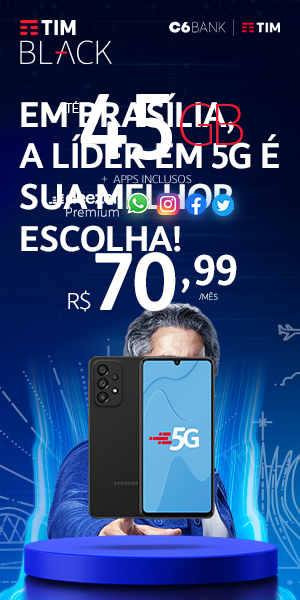
<style>
.page{position:relative;width:300px;height:600px}
.page>*{position:absolute;margin:0}
.t1{font:34.5px "TIMSans-Bold";letter-spacing:-0.02em;color:#ffffff;text-transform:uppercase}
.t2{font:13.1px "TIMSans-Light";letter-spacing:-0.06em;color:#ffffff;text-transform:uppercase}
.t3{font:90.8px "TIMSans-Medium";color:#ffffff;text-transform:uppercase}
.t4{font:57.3px "TIMSans-Thin";letter-spacing:-0.08em;color:#ed1b2f;text-transform:uppercase}
.t5{font:79px "TIMSans-Bold";color:#ffffff;text-transform:uppercase}
.t6{font:41.3px "TIMSans-Bold";color:#ffffff;text-transform:uppercase}
.t7{font:22.3px "TIMSans-Light";letter-spacing:-0.035em;color:#ffffff;text-transform:uppercase}
.t8{font:8.7px "TIMSans-Light";letter-spacing:-0.025em;color:#ffffff;text-transform:uppercase}
</style>
<div class="page">
<p class="t1" style="left:21px;top:93px;width:213px;height:41px">Em Brasília,</p>
<p class="t2" style="left:58px;top:101px;width:21px;height:12px">até</p>
<p class="t3" style="left:80px;top:94px;width:92px;height:66px">45</p>
<p class="t4" style="left:180px;top:103px;width:63px;height:43px">GB</p>
<p class="t1" style="left:19px;top:134px;width:260px;height:35px">a líder em 5G é</p>
<p class="t1" style="left:20px;top:183px;width:214px;height:27px">sua melhor</p>
<p class="t1" style="left:21px;top:225px;width:160px;height:27px">escolha!</p>
<p class="t5" style="left:95px;top:252px;width:81px;height:59px">70</p>
<p class="t6" style="left:194px;top:254px;width:43px;height:32px">99</p>
<p class="t6" style="left:181px;top:278px;width:9px;height:15px">,</p>
<p class="t7" style="left:68px;top:290px;width:23px;height:22px">R$</p>
<p class="t8" style="left:199px;top:292px;width:19px;height:8px">/mês</p>
</div>
